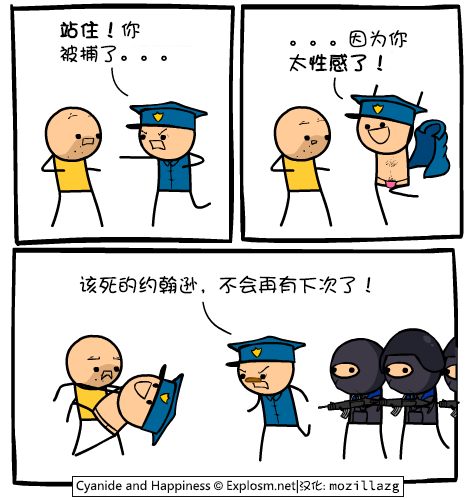
<style>
.page{position:relative;width:470px;height:500px;background:#ffffff}
.page>*{position:absolute;margin:0}
.t1{font:20px/24px "DFPShaoNvW5";color:#000000}
.t2{font:20px/24px "DFPShaoNvW5";color:#000000;font-weight:bold}
.t3{font:20px "DFPShaoNvW5";color:#000000}
</style>
<div class="page">
<p class="t1" style="left:60px;top:20px;width:107px;height:43px"><span class="t2">站住！</span>你<br>被捕了。。。</p>
<p class="t1" style="left:289px;top:30px;width:118px;height:42px">。。。因为你<br>太<span class="t2">性感了！</span></p>
<p class="t3" style="left:79px;top:275px;width:292px;height:19px">该死的约翰逊，不会再有下次了！</p>
</div>
